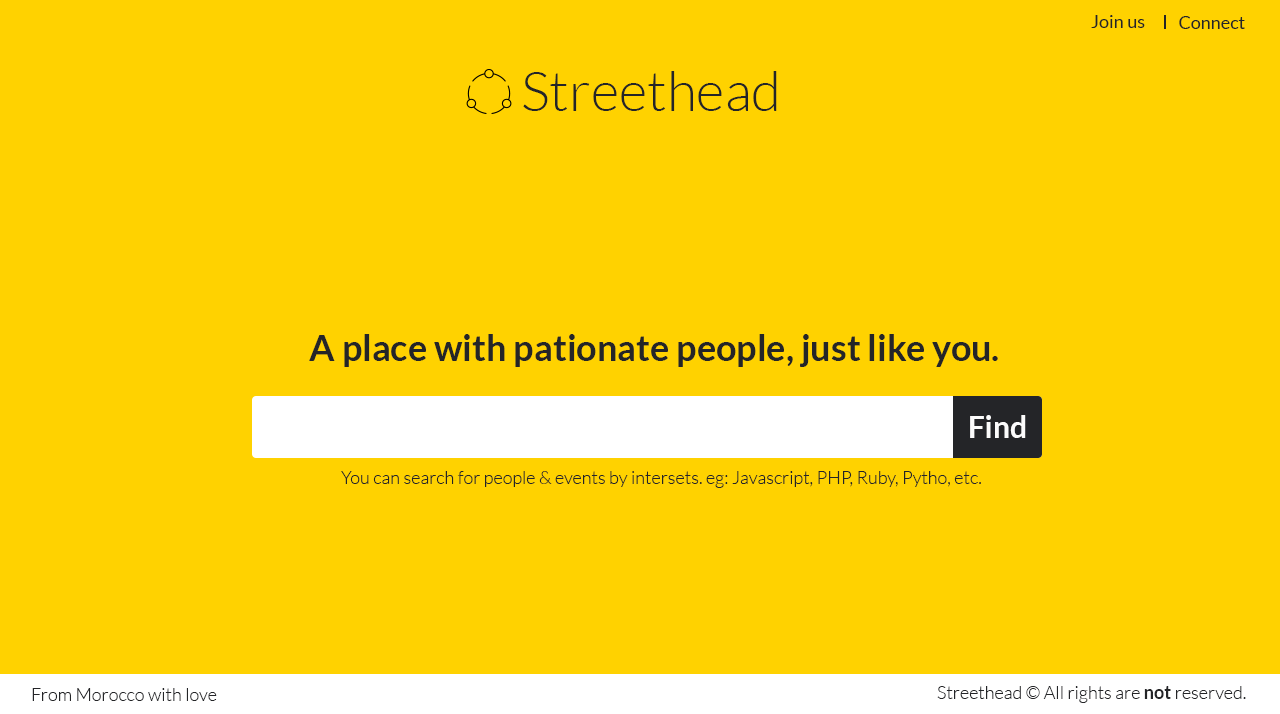
<style>
.page{position:relative;width:1280px;height:714px;background:#ffd200}
.page>*{position:absolute;margin:0}
.t1{font:18px "Lato-Regular";color:#242528}
.t2{font:55px "Lato-Light";color:#242528}
.t3{font:36px "Lato-Bold";color:#242528}
.t4{font:30px "Lato-Bold";color:#fcfcfc}
.t5{font:18px "Lato-Light";color:#242528}
.t6{font:18px "Lato-Bold";color:#242528}
</style>
<div class="page">
<p class="t1" style="left:1091px;top:15px;width:54px;height:13px">Join us</p>
<p class="t1" style="left:1179px;top:16px;width:66px;height:13px">Connect</p>
<p class="t2" style="left:523px;top:71px;width:254px;height:40px">Streethead</p>
<p class="t3" style="left:309px;top:334px;width:689px;height:33px">A place with pationate people, just like you.</p>
<p class="t4" style="left:970px;top:415px;width:56px;height:23px">Find</p>
<p class="t5" style="left:341px;top:471px;width:640px;height:17px">You can search for people &amp; events by intersets. eg: Javascript, PHP, Ruby, Pytho, etc.</p>
<p class="t5" style="left:32px;top:688px;width:185px;height:13px">From Morocco with love</p>
<p class="t5" style="left:937px;top:686px;width:309px;height:17px">Streethead © All rights are <span class="t6">not </span>reserved.</p>
</div>
